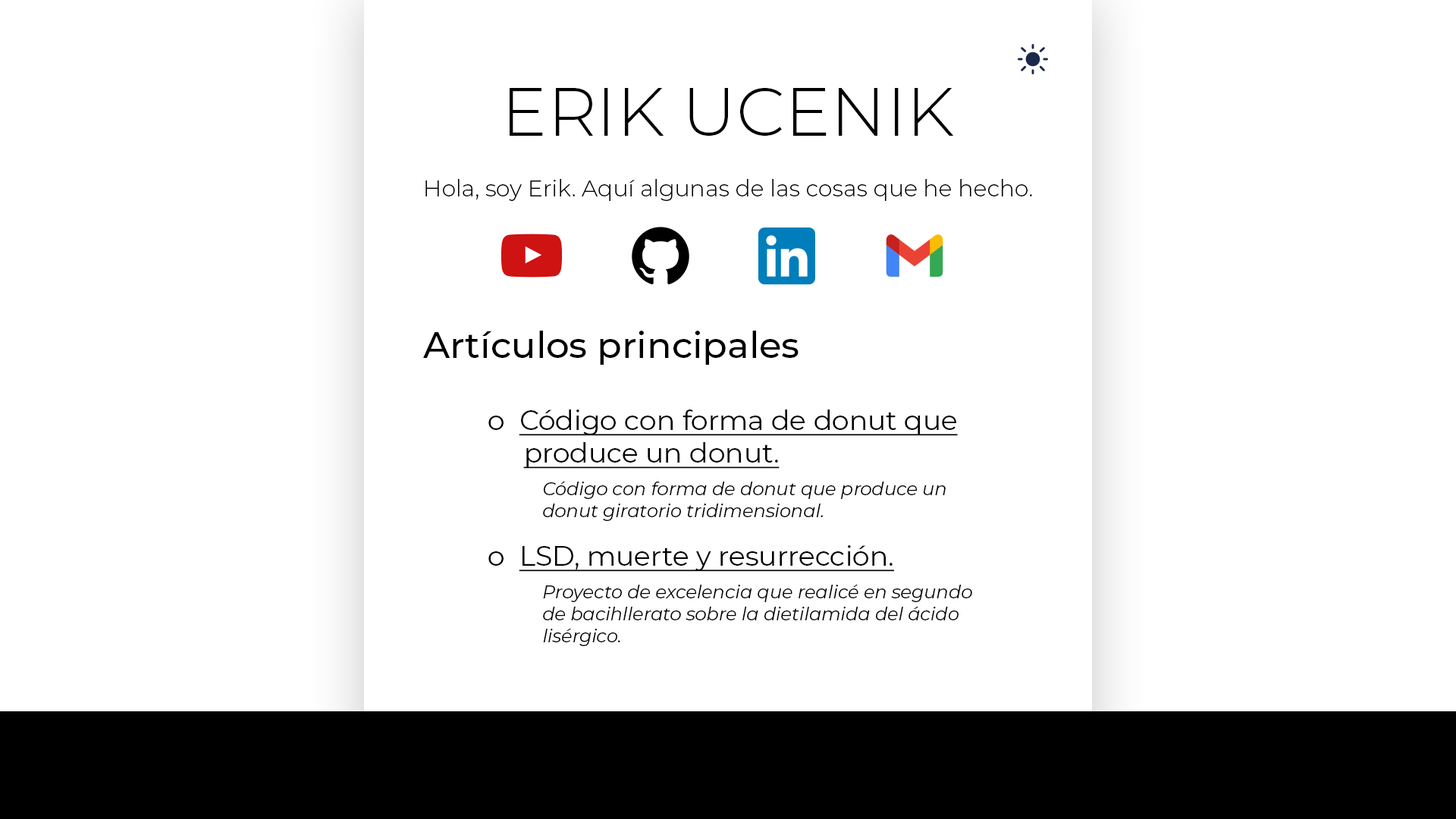
<style>
.page{position:relative;width:1456px;height:819px;background:#ffffff}
.page>*{position:absolute;margin:0}
.t1{font:68.2px "Montserrat-Light";color:#000000}
.t2{font:22.7px "Montserrat-Light";color:#000000}
.t3{font:36.4px "Montserrat-Medium";color:#000000}
.t4{font:18.2px "Montserrat-Italic";color:#000000}
.t5{font:27.3px "Montserrat-Regular";color:#000000}
.t6{font:27.3px "Montserrat-Regular";color:#000000;text-decoration:underline}
</style>
<div class="page">
<p class="t1" style="left:510px;top:88px;width:444px;height:48px">ERIK UCENIK</p>
<p class="t2" style="left:425px;top:179px;width:607px;height:22px">Hola, soy Erik. Aquí algunas de las cosas que he hecho.</p>
<p class="t3" style="left:423px;top:331px;width:376px;height:34px">Artículos principales</p>
<p class="t4" style="left:488px;top:409px;width:470px;height:112px"><span class="t5">o  </span><span class="t6">Código con forma de donut que<br>     produce un donut.<br>  </span>Código con forma de donut que produce un  <br>  donut giratorio tridimensional.</p>
<p class="t4" style="left:488px;top:545px;width:484px;height:101px"><span class="t5">o  </span><span class="t6">LSD, muerte y resurrección.<br>  </span>Proyecto de excelencia que realicé en segundo    de bacihllerato sobre la dietilamida del ácido    lisérgico.</p>
</div>
